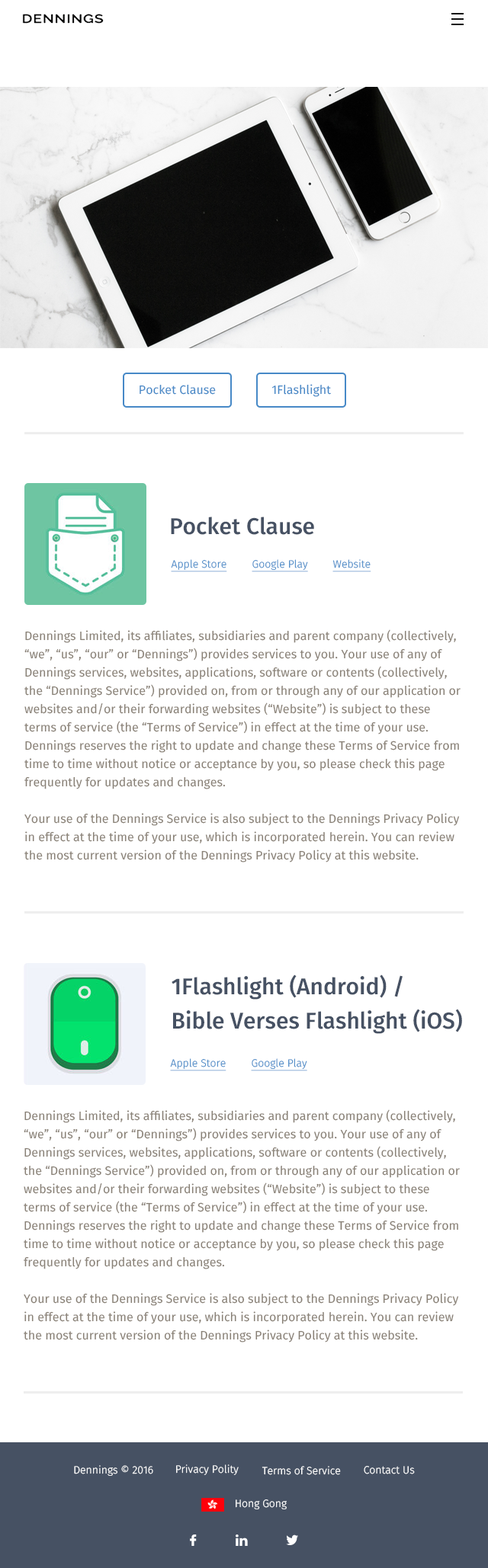
<style>
.page{position:relative;width:488px;height:1568px;background:#ffffff}
.page>*{position:absolute;margin:0}
.t1{font:12.2px "FiraSans-Regular";color:#4789c7}
.t2{font:22.9px "FiraSans-Medium";color:#465163}
.t3{font:10.7px "FiraSans-Light";color:#4789c7;text-decoration:underline}
.t4{font:12.2px/18.3px "FiraSans-Regular";color:#898176}
.t5{font:22.9px/34.3px "FiraSans-Medium";color:#465163}
.t6{font:10.7px "FiraSans-Light";color:#ffffff}
</style>
<div class="page">
<p class="t1" style="left:139px;top:384px;width:77px;height:11px">Pocket Clause</p>
<p class="t1" style="left:271px;top:384px;width:60px;height:13px">1Flashlight</p>
<p class="t2" style="left:171px;top:517px;width:143px;height:18px">Pocket Clause</p>
<p class="t3" style="left:171px;top:559px;width:56px;height:13px">Apple Store</p>
<p class="t3" style="left:251px;top:559px;width:57px;height:13px">Google Play</p>
<p class="t3" style="left:332px;top:559px;width:39px;height:13px">Website</p>
<p class="t4" style="left:24px;top:629px;width:436px;height:233px">Dennings Limited, its affiliates, subsidiaries and parent company (collectively, “we”, “us”, “our” or “Dennings”) provides services to you. Your use of any of Dennings services, websites, applications, software or contents (collectively, the “Dennings Service”) provided on, from or through any of our application or websites and/or their forwarding websites (“Website”) is subject to these terms of service (the “Terms of Service”) in effect at the time of your use. Dennings reserves the right to update and change these Terms of Service from time to time without notice or acceptance by you, so please check this page frequently for updates and changes.<br><br>Your use of the Dennings Service is also subject to the Dennings Privacy Policy in effect at the time of your use, which is incorporated herein. You can review the most current version of the Dennings Privacy Policy at this website.</p>
<p class="t5" style="left:171px;top:974px;width:291px;height:60px">1Flashlight (Android) /<br>Bible Verses Flashlight (iOS)</p>
<p class="t3" style="left:170px;top:1058px;width:56px;height:13px">Apple Store</p>
<p class="t3" style="left:251px;top:1058px;width:56px;height:13px">Google Play</p>
<p class="t4" style="left:24px;top:1109px;width:435px;height:233px">Dennings Limited, its affiliates, subsidiaries and parent company (collectively, “we”, “us”, “our” or “Dennings”) provides services to you. Your use of any of Dennings services, websites, applications, software or contents (collectively, the “Dennings Service”) provided on, from or through any of our application or websites and/or their forwarding websites (“Website”) is subject to these terms of service (the “Terms of Service”) in effect at the time of your use. Dennings reserves the right to update and change these Terms of Service from time to time without notice or acceptance by you, so please check this page frequently for updates and changes.<br><br>Your use of the Dennings Service is also subject to the Dennings Privacy Policy in effect at the time of your use, which is incorporated herein. You can review the most current version of the Dennings Privacy Policy at this website.</p>
<p class="t6" style="left:74px;top:1465px;width:79px;height:11px">Dennings © 2016</p>
<p class="t6" style="left:176px;top:1464px;width:62px;height:11px">Privacy Polity</p>
<p class="t6" style="left:261px;top:1466px;width:80px;height:9px">Terms of Service</p>
<p class="t6" style="left:363px;top:1466px;width:51px;height:8px">Contact Us</p>
<p class="t6" style="left:235px;top:1499px;width:51px;height:10px">Hong Gong</p>
</div>
